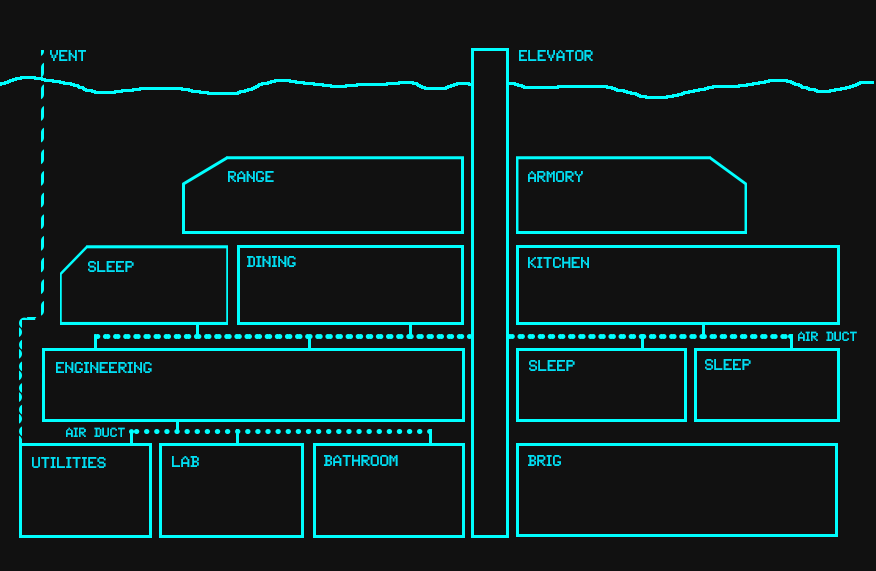
<style>
.page{position:relative;width:876px;height:571px;background:#111111}
.page>*{position:absolute;margin:0}
.t1{font:16px "Tandysoft";color:#00dff3}
.t2{font:12px "Tandysoft";color:#00dff3}
.t3{font:13.3px "Tandysoft";color:#00dff3}
</style>
<div class="page">
<p class="t1" style="left:50px;top:50px;width:36px;height:11px">vent</p>
<p class="t2" style="left:519px;top:50px;width:74px;height:11px">Elevator</p>
<p class="t2" style="left:228px;top:171px;width:46px;height:11px">Range</p>
<p class="t2" style="left:528px;top:171px;width:55px;height:11px">Armory</p>
<p class="t2" style="left:247px;top:256px;width:49px;height:11px">Dining</p>
<p class="t2" style="left:528px;top:257px;width:61px;height:11px">Kitchen</p>
<p class="t2" style="left:88px;top:261px;width:46px;height:11px">Sleep</p>
<p class="t3" style="left:798px;top:331px;width:59px;height:10px">air duct</p>
<p class="t1" style="left:56px;top:362px;width:96px;height:11px">engineering</p>
<p class="t2" style="left:529px;top:360px;width:46px;height:11px">Sleep</p>
<p class="t2" style="left:705px;top:359px;width:46px;height:11px">Sleep</p>
<p class="t3" style="left:66px;top:427px;width:59px;height:10px">air duct</p>
<p class="t1" style="left:32px;top:457px;width:74px;height:11px">Utilities</p>
<p class="t2" style="left:172px;top:456px;width:27px;height:11px">Lab</p>
<p class="t2" style="left:324px;top:455px;width:74px;height:11px">Bathroom</p>
<p class="t2" style="left:528px;top:455px;width:33px;height:11px">Brig</p>
</div>
